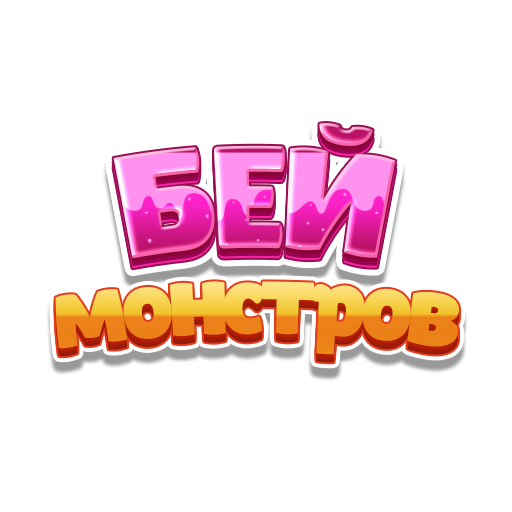
<style>
.page{position:relative;width:512px;height:512px;background:#ffffff}
.page>*{position:absolute;margin:0}
.t1{font:145.5px "LilitaOneRus"}
.t2{font:100px "LilitaOneRus";letter-spacing:-0.04em}
</style>
<div class="page">
<p class="t1" style="left:113px;top:123px;width:283px;height:136px">БЕЙ</p>
<p class="t2" style="left:55px;top:281px;width:404px;height:74px">монстров</p>
</div>
